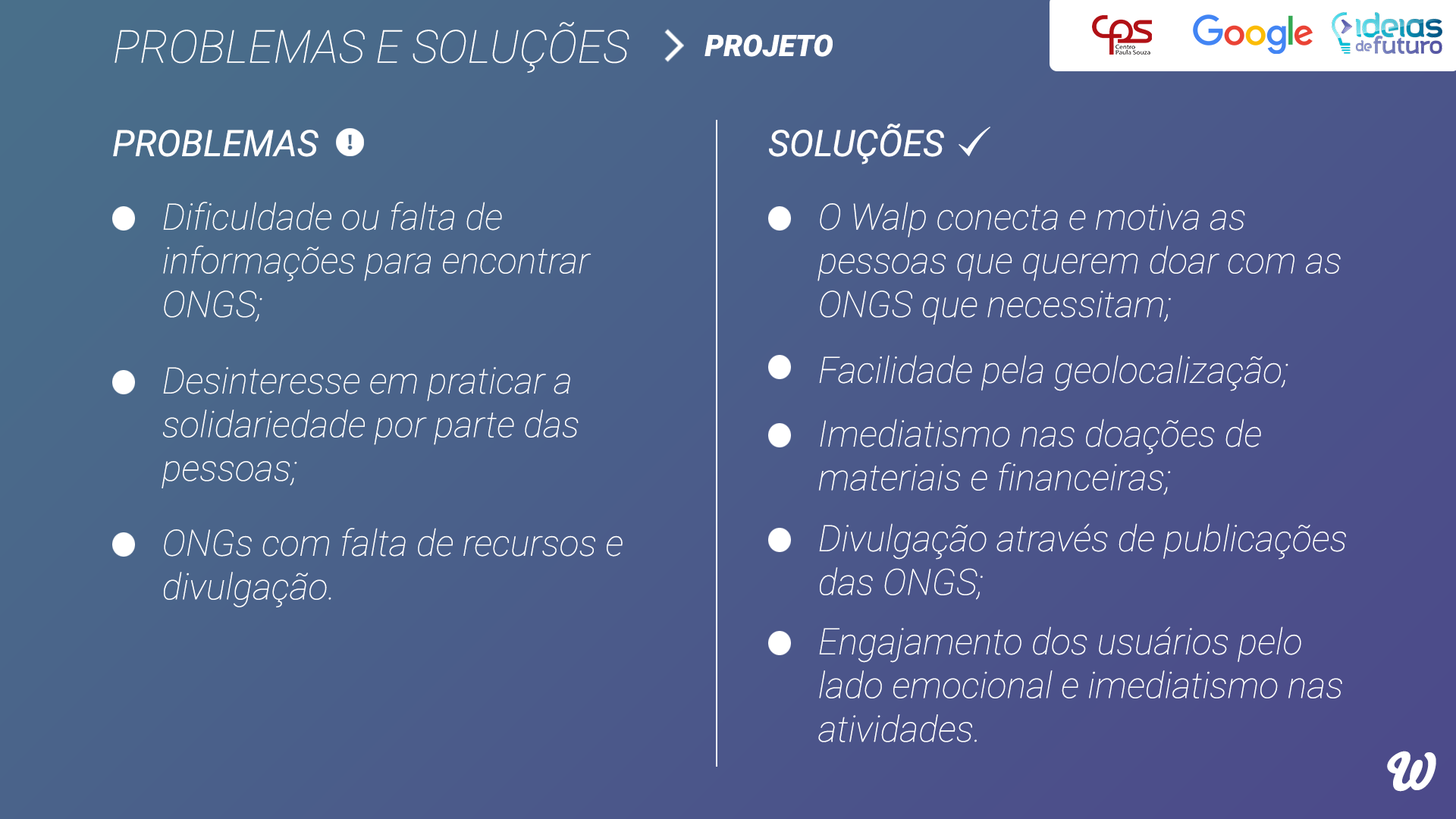
<style>
.page{position:relative;width:1456px;height:819px}
.page>*{position:absolute;margin:0}
.t1{font:45.5px "Roboto-ThinItalic";color:#ffffff}
.t2{font:29.7px "Roboto-BlackItalic";color:#ffffff}
.t3{font:36.4px "Roboto-Italic";color:#ffffff}
.t4{font:36.4px "Roboto-ThinItalic";color:#ffffff}
.t5{font:50.8px "Bello-Pro";color:#ffffff}
</style>
<div class="page">
<p class="t1" style="left:115px;top:22px;width:514px;height:51px">PROBLEMAS E SOLUÇÕES</p>
<p class="t2" style="left:704px;top:34px;width:129px;height:23px">PROJETO</p>
<p class="t3" style="left:769px;top:124px;width:175px;height:41px">SOLUÇÕES</p>
<p class="t3" style="left:113px;top:130px;width:205px;height:27px">PROBLEMAS</p>
<p class="t4" style="left:163px;top:202px;width:428px;height:120px">Dificuldade ou falta de informações para encontrar ONGS;</p>
<p class="t4" style="left:817px;top:202px;width:524px;height:123px">O Walp conecta e motiva as pessoas que querem doar com as ONGS que necessitam;</p>
<p class="t4" style="left:819px;top:355px;width:469px;height:36px">Facilidade pela geolocalização;</p>
<p class="t4" style="left:162px;top:367px;width:417px;height:121px">Desinteresse em praticar a solidariedade por parte das pessoas;</p>
<p class="t4" style="left:818px;top:419px;width:443px;height:76px">Imediatismo nas doações de materiais e financeiras;</p>
<p class="t4" style="left:164px;top:528px;width:459px;height:79px">ONGs com falta de recursos e divulgação.</p>
<p class="t4" style="left:819px;top:523px;width:527px;height:77px">Divulgação através de publicações das ONGS;</p>
<p class="t4" style="left:818px;top:626px;width:524px;height:116px">Engajamento dos usuários pelo lado emocional e imediatismo nas atividades.</p>
<p class="t5" style="left:1387px;top:751px;width:49px;height:41px">W</p>
</div>
